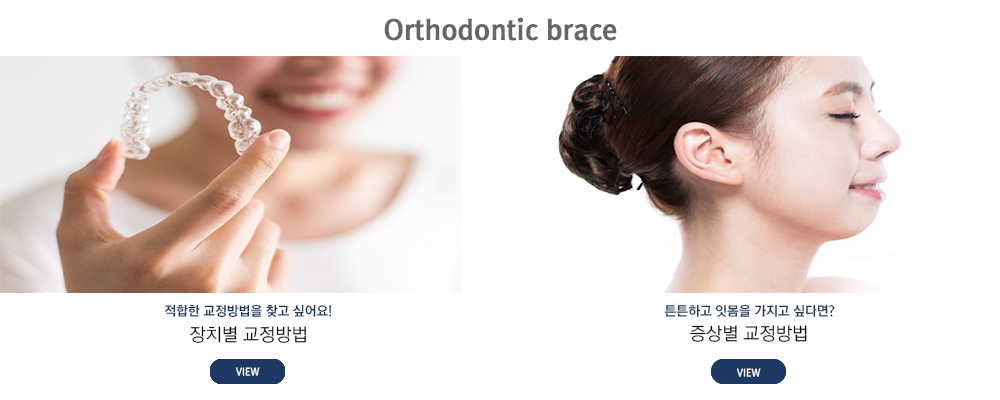
<style>
.page{position:relative;width:1000px;height:400px;background:#ffffff}
.page>*{position:absolute;margin:0}
.t1{font:27px "RixGoB";color:#676565;font-weight:bold}
.t2{font:13px "RixGoB";color:#1d3862}
.t3{font:17.8px "RixGoL";color:#000000}
.t4{font:10.2px "RixGoB";color:#ffffff;scale:0.95 1}
</style>
<div class="page">
<p class="t1" style="left:384px;top:17px;width:233px;height:24px">Orthodontic brace</p>
<p class="t2" style="left:164px;top:304px;width:168px;height:14px">적합한 교정방법을 찾고 싶어요!</p>
<p class="t2" style="left:665px;top:304px;width:170px;height:13px">튼튼하고 잇몸을 가지고 싶다면?</p>
<p class="t3" style="left:190px;top:326px;width:116px;height:17px">장치별 교정방법</p>
<p class="t3" style="left:690px;top:325px;width:117px;height:17px">증상별 교정방법</p>
<p class="t4" style="left:236px;top:367px;width:24px;height:9px">VIEW</p>
<p class="t4" style="left:737px;top:368px;width:24px;height:9px">VIEW</p>
</div>
